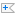
<style>
.page{position:relative;width:16px;height:16px;background:#ffffff}
.page>*{position:absolute;margin:0}
.t1{font:10px "CascadiaMono-Roman";color:#057ae7}
</style>
<div class="page">
<p class="t1" style="left:2px;top:5px;width:6px;height:5px">+</p>
</div>
